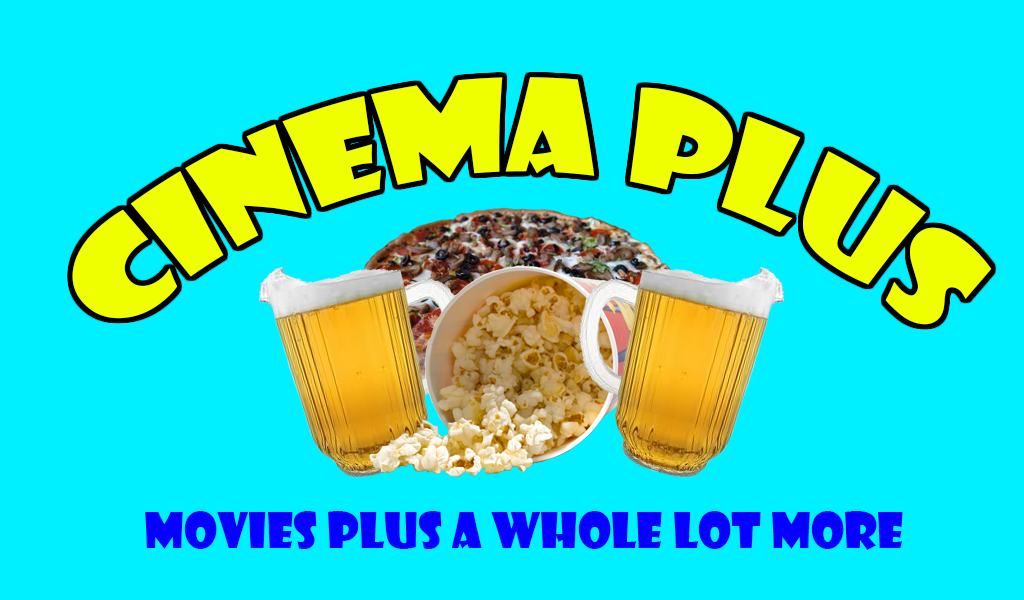
<style>
.page{position:relative;width:1024px;height:600px;background:#00f0ff}
.page>*{position:absolute;margin:0}
.t1{font:125px "ShowcardGothic-Reg";color:#f0ff00}
.t2{font:48px "ShowcardGothic-Reg";color:#0600ff}
</style>
<div class="page">
<p class="t1" style="left:72px;top:77px;width:920px;height:248px">CINEMA PLUS</p>
<p class="t2" style="left:145px;top:511px;width:758px;height:39px">Movies plus a whole lot more</p>
</div>
